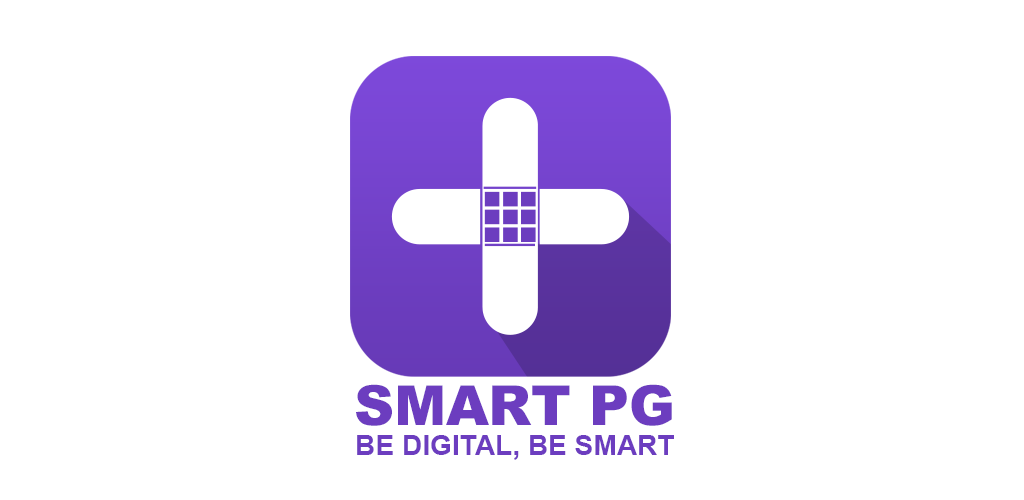
<style>
.page{position:relative;width:1024px;height:500px;background:#ffffff}
.page>*{position:absolute;margin:0}
.t1{font:55.1px "Arial-Black";color:#6c3dbf}
.t2{font:28.1px "Arial-BoldMT";color:#6c3dbf}
</style>
<div class="page">
<p class="t1" style="left:356px;top:384px;width:316px;height:42px">SMART PG</p>
<p class="t2" style="left:357px;top:435px;width:317px;height:25px">BE DIGITAL, BE SMART</p>
</div>
